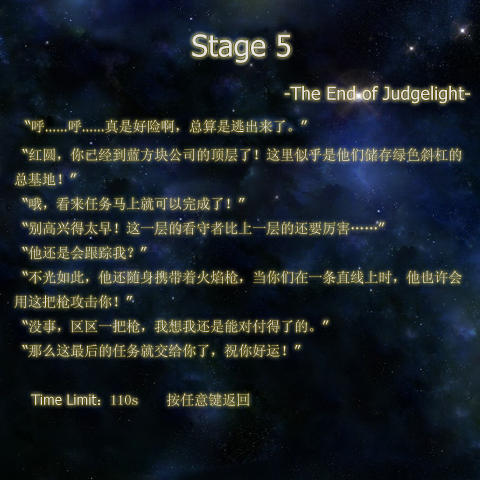
<style>
.page{position:relative;width:480px;height:480px}
.page>*{position:absolute;margin:0}
.t1{font:14px "SimSun";color:#e4e1e1}
.t2{font:24px "Tahoma";color:#e4e1e1}
.t3{font:30px "Tahoma";color:#e4e1e1}
.t4{font:18px "Tahoma";color:#e4e1e1}
.t5{font:14px "Tahoma";color:#e4e1e1}
</style>
<div class="page">
<p class="t1" style="left:14px;top:34px;width:456px;height:373px"><span class="t2"><br></span><span class="t3">Stage 5<br></span><span class="t4">                                                -The End of Judgelight-<br>  </span><span class="t5">“</span>呼<span class="t5">……</span>呼<span class="t5">……</span>真是好险啊，总算是逃出来了。<span class="t5">”<br>  “</span>红圆，你已经到蓝方块公司的顶层了！这里似乎是他们储存绿色斜杠的总基地！<span class="t5">”<br>  “</span>哦，看来任务马上就可以完成了！<span class="t5">”<br>  “</span>别高兴得太早！这一层的看守者比上一层的还要厉害……<span class="t5">”<br>  “</span>他还是会跟踪我？<span class="t5">”<br>  “</span>不光如此，他还随身携带着火焰枪，当你们在一条直线上时，他也许会用这把枪攻击你！<span class="t5">”<br>  “</span>没事，区区一把枪，我想我还是能对付得了的。<span class="t5">”<br>  “</span>那么这最后的任务就交给你了，祝你好运！<span class="t5">”<br><br>    Time Limit</span>：110s    按任意键返回</p>
</div>
